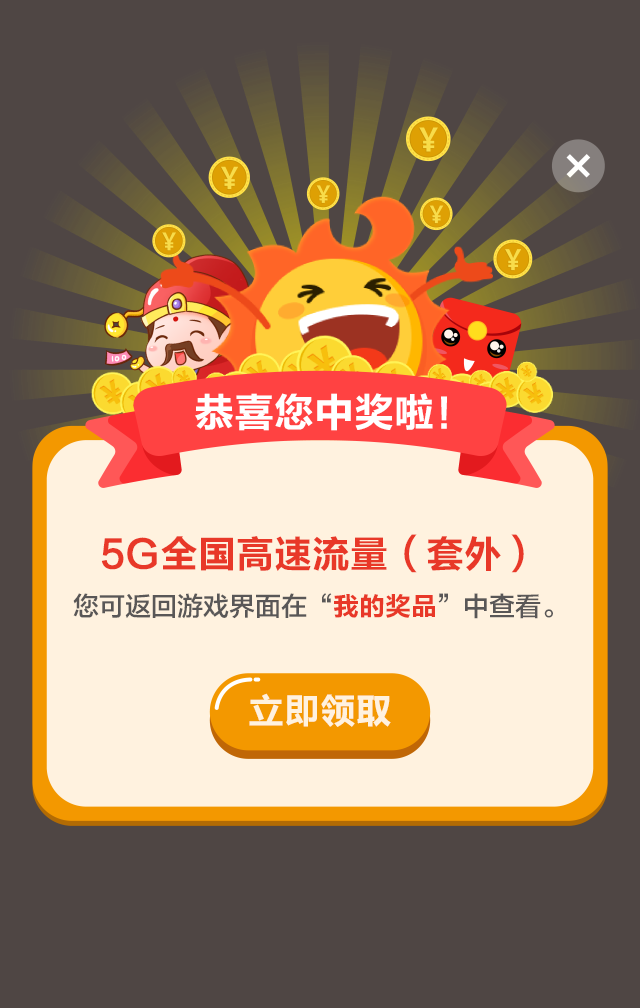
<style>
.page{position:relative;width:640px;height:1008px;background:#4f4644}
.page>*{position:absolute;margin:0}
.t1{font:40px "FZLTCHK--GBK1-0";color:#ffffff}
.t2{font:38px "FZLTCHK--GBK1-0";color:#e83828}
.t3{font:26px "FZLTZHK--GBK1-0";color:#595757}
.t4{font:26px "FZLTCHK--GBK1-0";color:#e83828}
.t5{font:36px "FZLTCHK--GBK1-0";color:#fff2df}
</style>
<div class="page">
<p class="t1" style="left:195px;top:393px;width:252px;height:38px">恭喜您中奖啦！</p>
<p class="t2" style="left:101px;top:534px;width:423px;height:39px">5G全国高速流量（套外）</p>
<p class="t3" style="left:73px;top:593px;width:480px;height:26px">您可返回游戏界面在“<span class="t4">我的奖品</span>”中查看。</p>
<p class="t5" style="left:249px;top:693px;width:142px;height:34px">立即领取</p>
</div>
